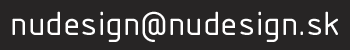
<style>
.page{position:relative;width:350px;height:50px;background:#272525}
.page>*{position:absolute;margin:0}
.t1{font:36px "ISOCPEUR";color:#ffffff;scale:1.08 1}
</style>
<div class="page">
<p class="t1" style="left:12px;top:11px;width:326px;height:31px">nudesign@nudesign.sk</p>
</div>
